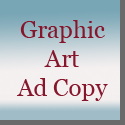
<style>
.page{position:relative;width:125px;height:125px}
.page>*{position:absolute;margin:0}
.t1{font:24px "Georgia";color:#86162b}
</style>
<div class="page">
<p class="t1" style="left:17px;top:20px;width:91px;height:81px;text-align:center">Graphic<br>Art<br>Ad Copy</p>
</div>
